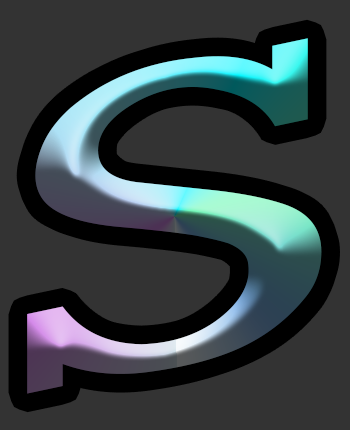
<style>
.page{position:relative;width:350px;height:430px;background:#333333}
.page>*{position:absolute;margin:0}
.t1{font:376.7px "HGPSoeiPresenceEB";scale:1.89 1}
</style>
<div class="page">
<p class="t1" style="left:27px;top:38px;width:295px;height:356px;rotate:-12deg">S</p>
</div>
